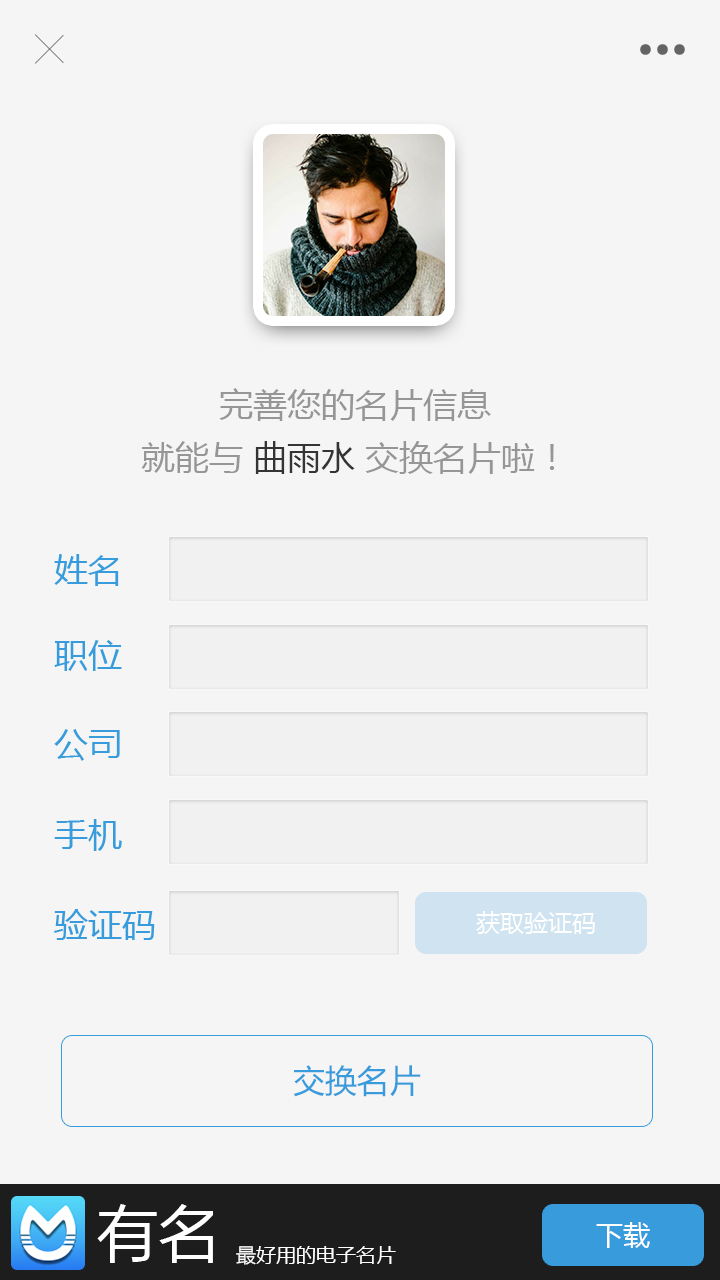
<style>
.page{position:relative;width:720px;height:1280px;background:#f5f5f5}
.page>*{position:absolute;margin:0}
.t1{font:34px/53px "MicrosoftYaHei";color:#969696}
.t2{font:34px/53px "MicrosoftYaHei";color:#343434}
.t3{font:34px "MicrosoftYaHei";color:#379bdc}
.t4{font:24px "MicrosoftYaHei";color:#ffffff}
.t5{font:32px "MicrosoftYaHei";color:#379bdc}
.t6{font:61.5px "MicrosoftYaHei";color:#ffffff}
.t7{font:27px "MicrosoftYaHei";color:#ffffff}
.t8{font:20px "MicrosoftYaHei";color:#ffffff}
</style>
<div class="page">
<p class="t1" style="left:141px;top:388px;width:414px;height:86px;text-align:center">完善您的名片信息<br>就能与<span class="t2"> 曲雨水 </span>交换名片啦！</p>
<p class="t3" style="left:54px;top:554px;width:65px;height:32px">姓名</p>
<p class="t3" style="left:54px;top:640px;width:68px;height:31px">职位</p>
<p class="t3" style="left:54px;top:729px;width:66px;height:32px">公司</p>
<p class="t3" style="left:54px;top:819px;width:68px;height:32px">手机</p>
<p class="t3" style="left:54px;top:909px;width:101px;height:31px">验证码</p>
<p class="t4" style="left:476px;top:911px;width:119px;height:23px">获取验证码</p>
<p class="t5" style="left:293px;top:1065px;width:128px;height:32px">交换名片</p>
<p class="t6" style="left:97px;top:1204px;width:116px;height:59px">有名</p>
<p class="t7" style="left:596px;top:1222px;width:54px;height:26px">下载</p>
<p class="t8" style="left:236px;top:1246px;width:160px;height:19px">最好用的电子名片</p>
</div>
